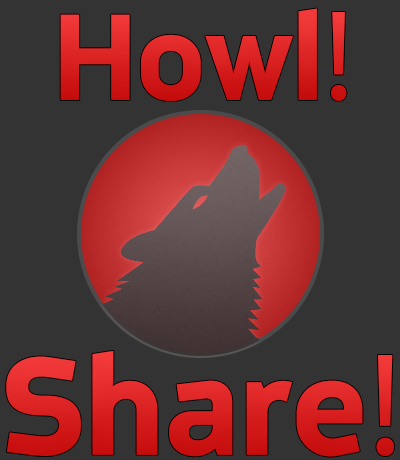
<style>
.page{position:relative;width:400px;height:460px;background:#333333}
.page>*{position:absolute;margin:0}
.t1{font:130px "PLMBIP+MetroflexWideBold";color:#da2222}
.t2{font:130px "MyriadPro-Regular";color:#da2222}
.t3{font:148px "PLMBIP+MetroflexWideBold";color:#d82020}
.t4{font:148px "MyriadPro-Regular";color:#d82020}
</style>
<div class="page">
<p class="t1" style="left:60px;top:8px;width:287px;height:94px">Howl<span class="t2">!</span></p>
<p class="t3" style="left:6px;top:350px;width:388px;height:107px">Share<span class="t4">!</span></p>
</div>
